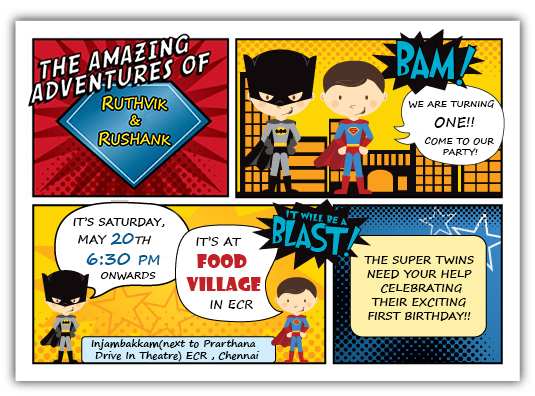
<style>
.page{position:relative;width:535px;height:396px;background:#ffffff}
.page>*{position:absolute;margin:0}
.t1{font:9px "SegoePrint-Bold";color:#000000}
.t2{font:14px "SegoePrint-Bold";color:#000000}
.t3{font:11px/18px "SegoePrint-Bold";color:#000000}
.t4{font:12px/18px "SegoePrint-Bold";color:#000000}
.t5{font:16px/14px "SegoePrint-Bold";color:#015c91}
.t6{font:11px/18px "SegoePrint-Bold";color:#000000;font-style:italic}
.t7{font:12px "SegoePrint-Bold";color:#000000}
.t8{font:18px "SegoePrint-Bold";color:#015c91}
.t9{font:14px "SegoePrint-Bold";color:#015c91}
.t10{font:19px "ShowcardGothic-Reg";color:#c22127}
.t11{font:11px/14px "SegoePrint-Bold";color:#000000}
.t12{font:10px "SegoePrint-Bold";color:#000000}
</style>
<div class="page">
<p class="t1" style="left:408px;top:100px;width:86px;height:8px">WE ARE TURNING</p>
<p class="t2" style="left:434px;top:117px;width:41px;height:11px">ONE!!</p>
<p class="t1" style="left:424px;top:137px;width:70px;height:19px">COME TO OUR <br>     PARTY!</p>
<p class="t3" style="left:73px;top:217px;width:92px;height:28px">IT’S SATURDAY,<br><span class="t4"> MAY </span><span class="t5">20</span><span class="t6">TH</span></p>
<p class="t7" style="left:196px;top:236px;width:46px;height:10px">IT’S AT</p>
<p class="t8" style="left:86px;top:253px;width:74px;height:12px">6:30 <span class="t9">PM</span></p>
<p class="t10" style="left:186px;top:254px;width:75px;height:37px;text-align:center">FOOD <br>VILLAGE</p>
<p class="t11" style="left:364px;top:256px;width:110px;height:65px;text-align:center">THE SUPER TWINS<br>NEED YOUR HELP<br> CELEBRATING<br>THEIR EXCITING<br>FIRST BIRTHDAY!!</p>
<p class="t12" style="left:100px;top:272px;width:56px;height:8px">ONWARDS</p>
<p class="t7" style="left:210px;top:300px;width:43px;height:9px">IN ECR</p>
<p class="t12" style="left:91px;top:339px;width:169px;height:23px">Injambakkam(next to Prarthana<br> Drive In Theatre) ECR , Chennai</p>
</div>
